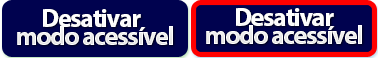
<style>
.page{position:relative;width:378px;height:58px;background:#00024f}
.page>*{position:absolute;margin:0}
.t1{font:26px/17.7px "MyriadPro-Bold";letter-spacing:-0.05em;color:#fcfcfc}
</style>
<div class="page">
<p class="t1" style="left:17px;top:9px;width:156px;height:36px;text-align:center">Desativar  <br>modo acessível</p>
<p class="t1" style="left:206px;top:8px;width:156px;height:36px;text-align:center">Desativar<br>modo acessível</p>
</div>
